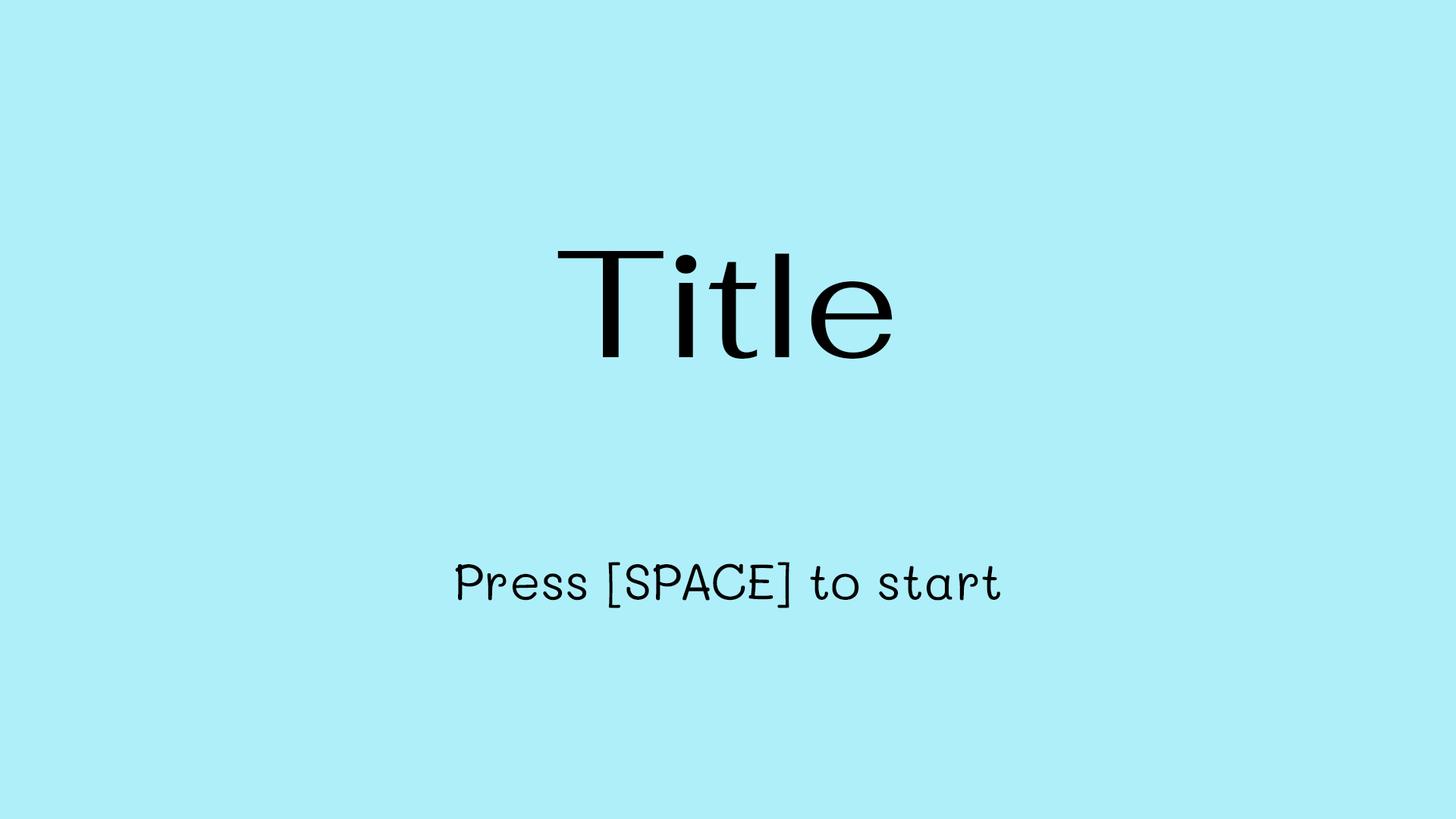
<style>
.page{position:relative;width:1456px;height:819px;background:#afeff9}
.page>*{position:absolute;margin:0}
.t1{font:151.7px "Fahkwang-Regular";color:#000000}
.t2{font:50.6px "Mali-Regular";color:#000000}
</style>
<div class="page">
<p class="t1" style="left:557px;top:251px;width:336px;height:108px">Title</p>
<p class="t2" style="left:455px;top:562px;width:545px;height:46px">Press [SPACE] to start</p>
</div>
